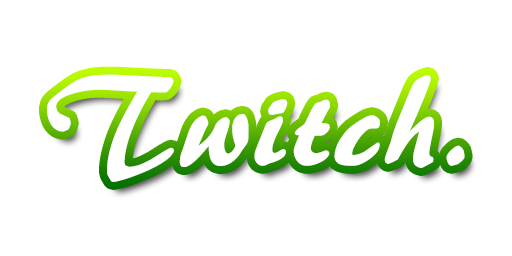
<style>
.page{position:relative;width:512px;height:256px;background:#ffffff}
.page>*{position:absolute;margin:0}
.t1{font:128px "ARBERKLEY";color:#ffffff;font-weight:bold}
</style>
<div class="page">
<p class="t1" style="left:47px;top:74px;width:418px;height:108px">Twitch.</p>
</div>
